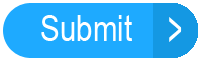
<style>
.page{position:relative;width:200px;height:61px;background:#1eaaff}
.page>*{position:absolute;margin:0}
.t1{font:36px "ArialNarrowSpecialG1";color:#ffffff}
.t2{font:52.2px "ArialNarrowSpecialG1";color:#ffffff;scale:0.58 1}
</style>
<div class="page">
<p class="t1" style="left:41px;top:15px;width:91px;height:26px">Submit</p>
<p class="t2" style="left:169px;top:17px;width:13px;height:25px">&gt;</p>
</div>
